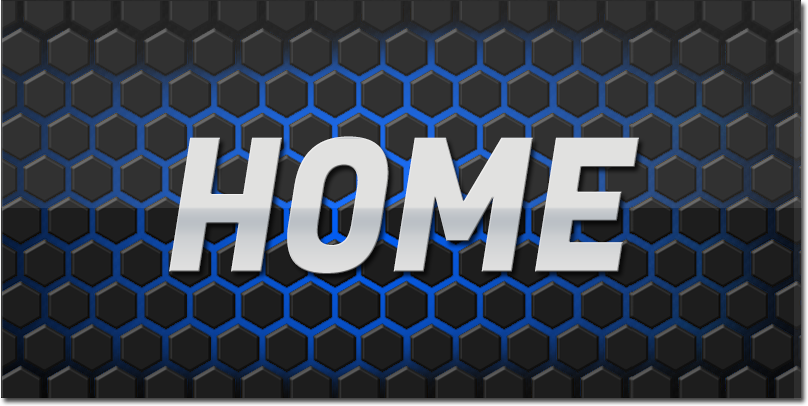
<style>
.page{position:relative;width:808px;height:406px;background:#313131}
.page>*{position:absolute;margin:0}
.t1{font:185.2px "FugazOne-Regular";color:#dfdfdf;scale:0.89 1}
</style>
<div class="page">
<p class="t1" style="left:169px;top:136px;width:470px;height:138px">HOME</p>
</div>
